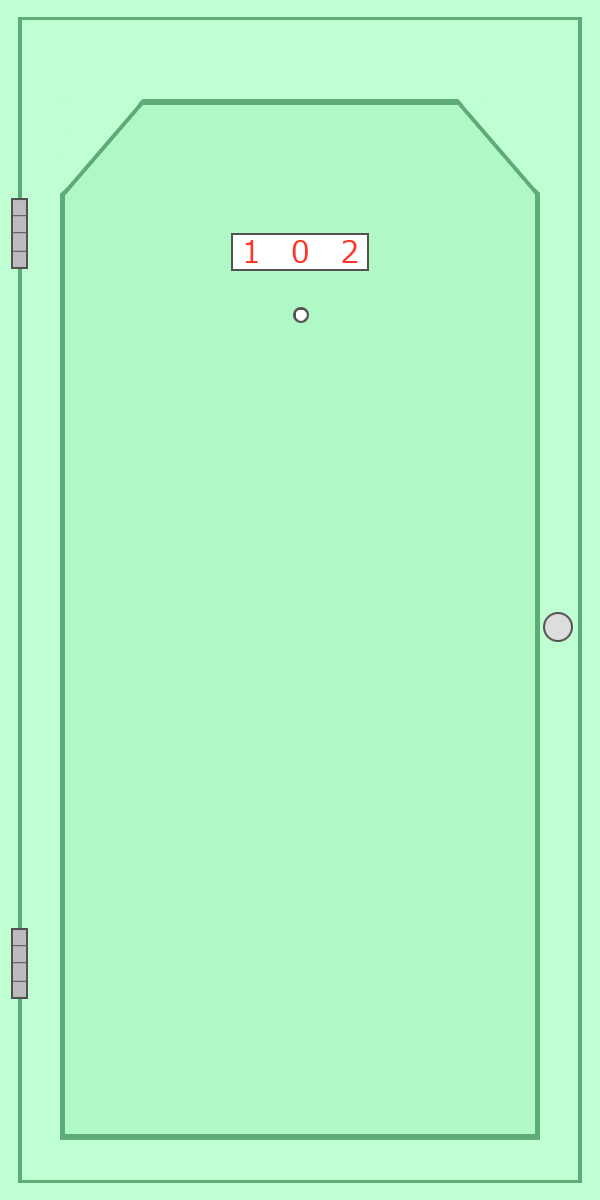
<style>
.page{position:relative;width:600px;height:1200px;background:#b0f8c6}
.page>*{position:absolute;margin:0}
.t1{font:30px "Meiryo";color:#ff362a}
</style>
<div class="page">
<p class="t1" style="left:245px;top:240px;width:113px;height:23px">1   0   2</p>
</div>
